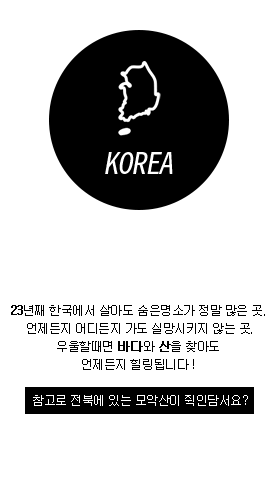
<style>
.page{position:relative;width:280px;height:500px;background:#ffffff}
.page>*{position:absolute;margin:0}
.t1{font:30px "NotoSansMonoCJKkr-Regular";letter-spacing:-0.04em;color:#ffffff;font-style:italic}
.t2{font:12px/18px "Gulim";letter-spacing:-0.04em;color:#000000}
.t3{font:12px/18px "Gulim";letter-spacing:-0.04em;color:#000000;font-weight:bold}
.t4{font:12px/18px "Gulim";letter-spacing:-0.04em;color:#ffffff}
</style>
<div class="page">
<p class="t1" style="left:105px;top:152px;width:68px;height:22px">KOREA</p>
<p class="t2" style="left:11px;top:305px;width:254px;height:101px;text-align:center"><span class="t3">23</span>년째 한국에서 살아도 숨은명소가 정말 많은 곳. <br>언제든지 어디든지 가도 실망시키지 않는 곳.<br>우울할때면 <span class="t3">바다</span>와 <span class="t3">산</span>을 찾아도 <br>언제든지 힐링됩니다 ! <br><br><span class="t4">참고로 전북에 있는 모악산이 쥑인담서요?</span></p>
</div>
